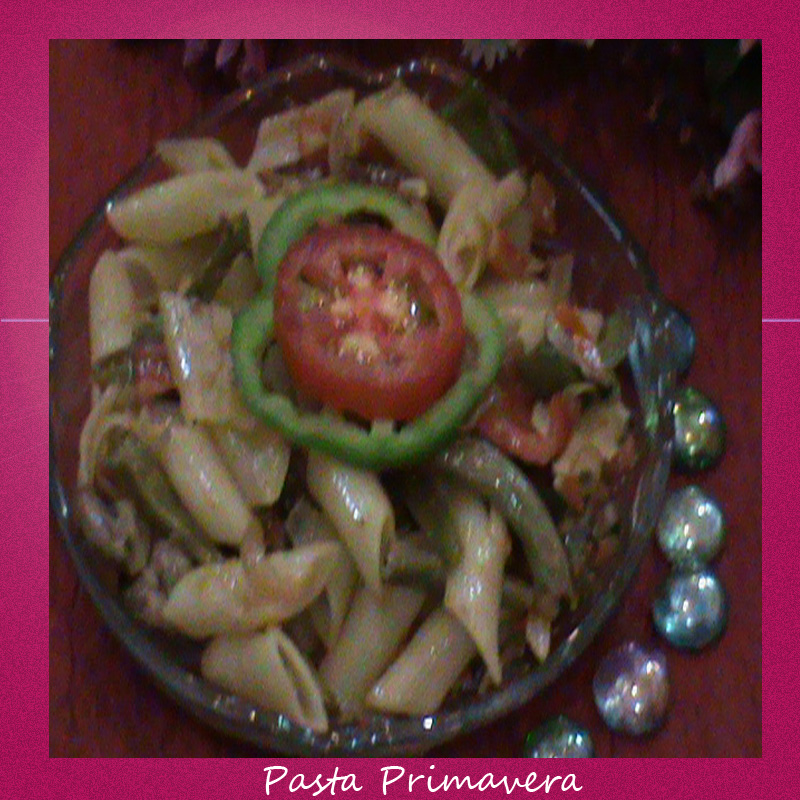
<style>
.page{position:relative;width:800px;height:800px}
.page>*{position:absolute;margin:0}
.t1{font:36px "SegoeScript";color:#fffdfd}
</style>
<div class="page">
<p class="t1" style="left:263px;top:765px;width:320px;height:31px">Pasta Primavera</p>
</div>
